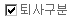
<style>
.page{position:relative;width:70px;height:20px;background:#ffffff}
.page>*{position:absolute;margin:0}
.t1{font:12px "Gulim";color:#666666}
</style>
<div class="page">
<p class="t1" style="left:21px;top:4px;width:46px;height:11px">퇴사구분</p>
</div>
